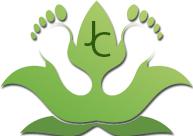
<style>
.page{position:relative;width:193px;height:136px;background:#ffffff}
.page>*{position:absolute;margin:0}
.t1{font:37px "MyriadPro-Regular";color:#2d5b0f}
</style>
<div class="page">
<p class="t1" style="left:84px;top:21px;width:12px;height:25px">J</p>
<p class="t1" style="left:91px;top:32px;width:20px;height:25px">C</p>
</div>
